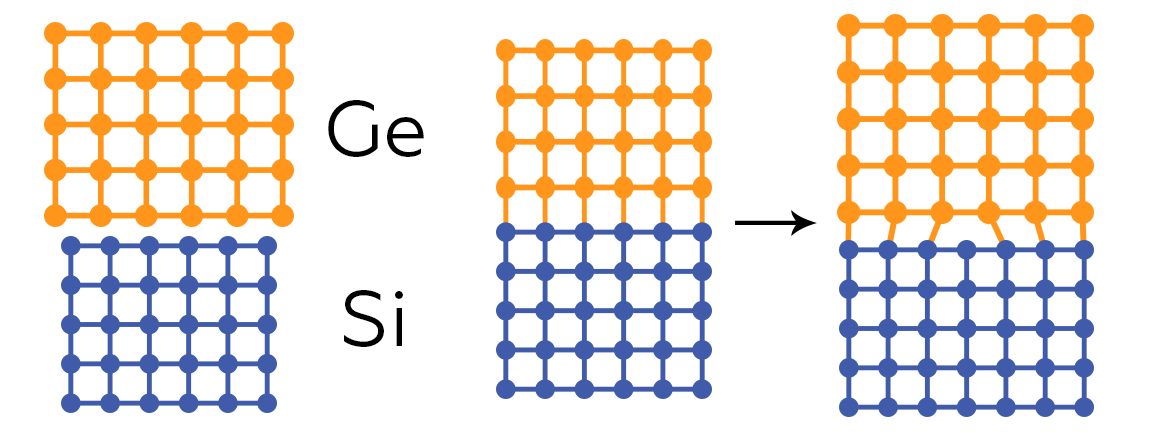
<style>
.page{position:relative;width:1151px;height:438px;background:#ffffff}
.page>*{position:absolute;margin:0}
.t1{font:78px "Geometria";color:#000000}
</style>
<div class="page">
<p class="t1" style="left:328px;top:100px;width:96px;height:57px">Ge</p>
<p class="t1" style="left:344px;top:290px;width:59px;height:57px">Si</p>
</div>
